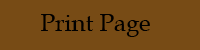
<style>
.page{position:relative;width:200px;height:50px;background:#774b15}
.page>*{position:absolute;margin:0}
.t1{font:24px "BookAntiqua";color:#000000}
</style>
<div class="page">
<p class="t1" style="left:41px;top:14px;width:109px;height:23px">Print Page</p>
</div>
